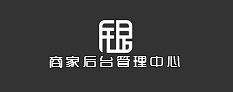
<style>
.page{position:relative;width:233px;height:92px;background:#333333}
.page>*{position:absolute;margin:0}
.t1{font:14px "TRENDS";letter-spacing:0.2em;color:#ffffff}
</style>
<div class="page">
<p class="t1" style="left:49px;top:56px;width:131px;height:12px">商家后台管理中心</p>
</div>
